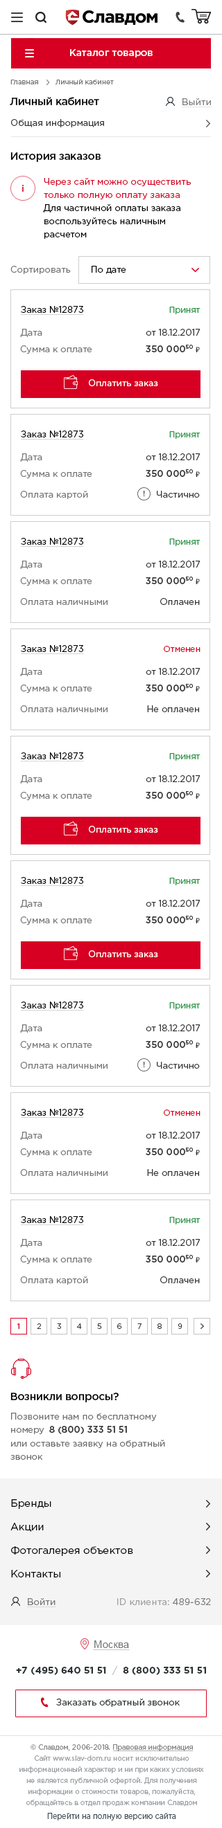
<style>
.page{position:relative;width:222px;height:1828px;background:#ffffff}
.page>*{position:absolute;margin:0}
.t1{font:9.7px "GothamPro-Medium";color:#ffffff}
.t2{font:6.9px "GothamPro";color:#737373}
.t3{font:10.9px "GothamPro-Medium";letter-spacing:-0.025em;color:#000000}
.t4{font:9px "GothamPro";letter-spacing:0.015em;color:#7a7b7e;text-decoration:underline}
.t5{font:9px "GothamPro";color:#333333}
.t6{font:9px/13.2px "GothamPro";color:#d70022}
.t7{font:9px/13.2px "GothamPro";color:#000000}
.t8{font:9px "GothamPro";color:#737373}
.t9{font:9px "GothamPro";color:#000000}
.t10{font:9px "GothamPro";color:#000000;text-decoration:underline}
.t11{font:8.3px "GothamPro";color:#249542}
.t12{font:9px "GothamPro";color:#757575}
.t13{font:9px "GothamPro-Medium";color:#333333}
.t14{font:8.3px "Calibri";color:#333333}
.t15{font:9px "GothamPro";color:#ffffff}
.t16{font:7.6px "GothamPro";letter-spacing:0.01em;color:#343434}
.t17{font:8.3px "GothamPro";color:#d70022}
.t18{font:7.6px "GothamPro-Medium";color:#d70022}
.t19{font:7.6px "GothamPro";color:#343434}
.t20{font:9px/13.2px "GothamPro";color:#6e6e6e}
.t21{font:10.4px/23.5px "GothamPro";color:#000000}
.t22{font:9px "GothamPro";letter-spacing:0.015em;color:#757679;text-decoration:underline}
.t23{font:9px "GothamPro";letter-spacing:0.015em}
.t24{font:10.4px "ArialMT";color:#737373}
.t25{font:9.5px "GothamPro-Bold";color:#2b3032}
.t26{font:9.5px "GothamPro-Light";color:#b4b7b8}
.t27{font:9px "GothamPro";color:#2b3032}
.t28{font:7.6px/11.1px "GothamPro";color:#9a9ea2;scale:0.89 1}
.t29{font:8.3px "GothamPro";color:#48535b;scale:0.89 1}
</style>
<div class="page">
<p class="t1" style="left:70px;top:49px;width:82px;height:8px">Каталог товаров</p>
<p class="t2" style="left:10px;top:80px;width:104px;height:4px">Главная        Личный кабинет</p>
<p class="t3" style="left:10px;top:97px;width:89px;height:8px">Личный кабинет</p>
<p class="t4" style="left:181px;top:98px;width:31px;height:9px">Выйти</p>
<p class="t5" style="left:11px;top:119px;width:93px;height:8px">Общая информация</p>
<p class="t3" style="left:10px;top:152px;width:91px;height:10px">История заказов</p>
<p class="t6" style="left:44px;top:178px;width:146px;height:22px">Через сайт можно осуществить <br>только полную оплату заказа</p>
<p class="t7" style="left:43px;top:204px;width:137px;height:35px">Для частичной оплаты заказа <br>воспользуйтесь наличным <br>расчетом</p>
<p class="t8" style="left:10px;top:266px;width:61px;height:8px">Сортировать</p>
<p class="t9" style="left:91px;top:266px;width:35px;height:8px">По дате</p>
<p class="t10" style="left:21px;top:306px;width:63px;height:9px">Заказ №12873</p>
<p class="t11" style="left:169px;top:307px;width:31px;height:7px">Принят</p>
<p class="t12" style="left:20px;top:329px;width:22px;height:8px">Дата</p>
<p class="t5" style="left:145px;top:329px;width:55px;height:7px">от 18.12.2017</p>
<p class="t12" style="left:20px;top:345px;width:72px;height:9px">Сумма к оплате</p>
<p class="t13" style="left:145px;top:345px;width:54px;height:8px">350 00050 <span class="t14">₽</span></p>
<p class="t15" style="left:89px;top:379px;width:69px;height:7px">Оплатить заказ</p>
<p class="t10" style="left:21px;top:431px;width:63px;height:9px">Заказ №12873</p>
<p class="t11" style="left:169px;top:431px;width:31px;height:8px">Принят</p>
<p class="t12" style="left:20px;top:453px;width:22px;height:9px">Дата</p>
<p class="t5" style="left:145px;top:453px;width:55px;height:7px">от 18.12.2017</p>
<p class="t12" style="left:20px;top:470px;width:72px;height:9px">Сумма к оплате</p>
<p class="t13" style="left:145px;top:469px;width:54px;height:9px">350 00050 <span class="t14">₽</span></p>
<p class="t12" style="left:20px;top:491px;width:68px;height:8px">Оплата картой</p>
<p class="t16" style="left:143px;top:491px;width:2px;height:5px">!</p>
<p class="t5" style="left:156px;top:491px;width:43px;height:7px">Частично</p>
<p class="t10" style="left:21px;top:538px;width:63px;height:9px">Заказ №12873</p>
<p class="t11" style="left:169px;top:539px;width:31px;height:7px">Принят</p>
<p class="t12" style="left:20px;top:561px;width:22px;height:8px">Дата</p>
<p class="t5" style="left:145px;top:561px;width:55px;height:7px">от 18.12.2017</p>
<p class="t12" style="left:20px;top:577px;width:72px;height:9px">Сумма к оплате</p>
<p class="t13" style="left:145px;top:577px;width:54px;height:8px">350 00050 <span class="t14">₽</span></p>
<p class="t12" style="left:20px;top:598px;width:87px;height:7px">Оплата наличными</p>
<p class="t5" style="left:160px;top:598px;width:39px;height:7px">Оплачен</p>
<p class="t10" style="left:21px;top:645px;width:63px;height:9px">Заказ №12873</p>
<p class="t17" style="left:163px;top:646px;width:37px;height:6px">Отменен</p>
<p class="t12" style="left:20px;top:668px;width:22px;height:8px">Дата</p>
<p class="t5" style="left:145px;top:668px;width:55px;height:7px">от 18.12.2017</p>
<p class="t12" style="left:20px;top:685px;width:72px;height:9px">Сумма к оплате</p>
<p class="t13" style="left:145px;top:684px;width:54px;height:8px">350 00050 <span class="t14">₽</span></p>
<p class="t12" style="left:20px;top:705px;width:87px;height:7px">Оплата наличными</p>
<p class="t5" style="left:147px;top:705px;width:52px;height:7px">Не оплачен</p>
<p class="t10" style="left:21px;top:753px;width:63px;height:9px">Заказ №12873</p>
<p class="t11" style="left:169px;top:753px;width:31px;height:8px">Принят</p>
<p class="t12" style="left:20px;top:775px;width:22px;height:9px">Дата</p>
<p class="t5" style="left:145px;top:775px;width:55px;height:7px">от 18.12.2017</p>
<p class="t12" style="left:20px;top:792px;width:72px;height:9px">Сумма к оплате</p>
<p class="t13" style="left:145px;top:791px;width:54px;height:9px">350 00050 <span class="t14">₽</span></p>
<p class="t15" style="left:89px;top:826px;width:69px;height:7px">Оплатить заказ</p>
<p class="t10" style="left:21px;top:877px;width:63px;height:9px">Заказ №12873</p>
<p class="t11" style="left:169px;top:878px;width:31px;height:7px">Принят</p>
<p class="t12" style="left:20px;top:900px;width:22px;height:8px">Дата</p>
<p class="t5" style="left:145px;top:900px;width:55px;height:7px">от 18.12.2017</p>
<p class="t12" style="left:20px;top:917px;width:72px;height:9px">Сумма к оплате</p>
<p class="t13" style="left:145px;top:916px;width:54px;height:8px">350 00050 <span class="t14">₽</span></p>
<p class="t15" style="left:89px;top:951px;width:69px;height:6px">Оплатить заказ</p>
<p class="t10" style="left:21px;top:1002px;width:63px;height:9px">Заказ №12873</p>
<p class="t11" style="left:169px;top:1002px;width:31px;height:8px">Принят</p>
<p class="t12" style="left:20px;top:1025px;width:22px;height:8px">Дата</p>
<p class="t5" style="left:145px;top:1025px;width:55px;height:7px">от 18.12.2017</p>
<p class="t12" style="left:20px;top:1041px;width:72px;height:9px">Сумма к оплате</p>
<p class="t13" style="left:145px;top:1041px;width:54px;height:8px">350 00050 <span class="t14">₽</span></p>
<p class="t12" style="left:20px;top:1062px;width:87px;height:7px">Оплата наличными</p>
<p class="t16" style="left:143px;top:1062px;width:2px;height:6px">!</p>
<p class="t5" style="left:156px;top:1062px;width:43px;height:7px">Частично</p>
<p class="t10" style="left:21px;top:1109px;width:63px;height:9px">Заказ №12873</p>
<p class="t17" style="left:163px;top:1110px;width:37px;height:6px">Отменен</p>
<p class="t12" style="left:20px;top:1132px;width:22px;height:8px">Дата</p>
<p class="t5" style="left:145px;top:1132px;width:55px;height:7px">от 18.12.2017</p>
<p class="t12" style="left:20px;top:1149px;width:72px;height:9px">Сумма к оплате</p>
<p class="t13" style="left:145px;top:1148px;width:54px;height:8px">350 00050 <span class="t14">₽</span></p>
<p class="t12" style="left:20px;top:1169px;width:87px;height:7px">Оплата наличными</p>
<p class="t5" style="left:147px;top:1169px;width:52px;height:7px">Не оплачен</p>
<p class="t10" style="left:21px;top:1216px;width:63px;height:9px">Заказ №12873</p>
<p class="t11" style="left:169px;top:1217px;width:31px;height:8px">Принят</p>
<p class="t12" style="left:20px;top:1239px;width:22px;height:9px">Дата</p>
<p class="t5" style="left:145px;top:1239px;width:55px;height:7px">от 18.12.2017</p>
<p class="t12" style="left:20px;top:1256px;width:72px;height:9px">Сумма к оплате</p>
<p class="t13" style="left:145px;top:1255px;width:54px;height:8px">350 00050 <span class="t14">₽</span></p>
<p class="t12" style="left:20px;top:1277px;width:68px;height:8px">Оплата картой</p>
<p class="t5" style="left:160px;top:1277px;width:39px;height:7px">Оплачен</p>
<p class="t18" style="left:17px;top:1324px;width:2px;height:5px">1</p>
<p class="t19" style="left:37px;top:1324px;width:4px;height:5px">2</p>
<p class="t19" style="left:57px;top:1324px;width:4px;height:5px">3</p>
<p class="t19" style="left:76px;top:1324px;width:6px;height:5px">4</p>
<p class="t19" style="left:97px;top:1324px;width:5px;height:5px">5</p>
<p class="t19" style="left:117px;top:1324px;width:5px;height:5px">6</p>
<p class="t19" style="left:137px;top:1324px;width:4px;height:5px">7</p>
<p class="t19" style="left:157px;top:1324px;width:5px;height:5px">8</p>
<p class="t19" style="left:177px;top:1324px;width:5px;height:5px">9</p>
<p class="t3" style="left:10px;top:1393px;width:108px;height:10px">Возникли вопросы?</p>
<p class="t20" style="left:11px;top:1413px;width:145px;height:22px">Позвоните нам по бесплатному <br>номеру</p>
<p class="t13" style="left:49px;top:1426px;width:78px;height:8px">8 (800) 333 51 51</p>
<p class="t20" style="left:10px;top:1440px;width:155px;height:20px">или оставьте заявку на обратный <br>звонок</p>
<p class="t21" style="left:10px;top:1500px;width:123px;height:78px">Бренды           <br>Акции           <br>Фотогалерея объектов<br>Контакты</p>
<p class="t22" style="left:27px;top:1599px;width:29px;height:9px">Войти</p>
<p class="t23" style="left:117px;top:1599px;width:93px;height:6px">ID клиента: 489-632</p>
<p class="t24" style="left:94px;top:1641px;width:35px;height:7px">Москва</p>
<p class="t25" style="left:16px;top:1666px;width:190px;height:9px">+7 (495) 640 51 51  <span class="t26">/</span>  8 (800) 333 51 51</p>
<p class="t27" style="left:56px;top:1699px;width:123px;height:8px">Заказать обратный звонок</p>
<p class="t28" style="left:19px;top:1745px;width:185px;height:62px;text-align:center">© Славдом, 2006-2018. Правовая информация<br>Сайт www.slav-dom.ru носит исключительно<br>информационный характер и ни при каких условиях<br>не является публичной офертой. Для получения<br>информации о стоимости товаров, пожалуйста,<br>обращайтесь в отдел продаж компании Славдом</p>
<p class="t29" style="left:47px;top:1813px;width:129px;height:8px">Перейти на полную версию сайта</p>
</div>
